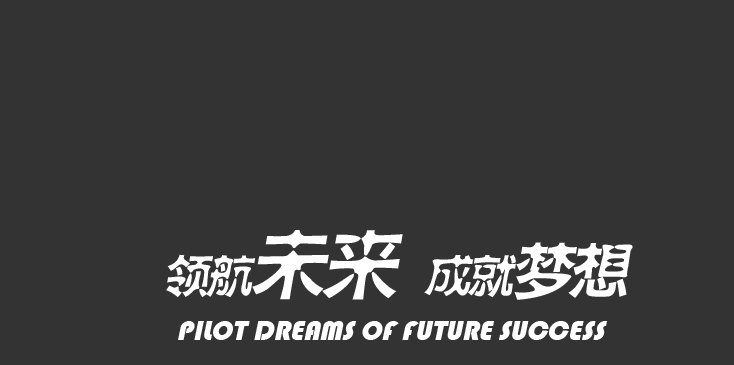
<style>
.page{position:relative;width:734px;height:365px;background:#333333}
.page>*{position:absolute;margin:0}
.t1{font:45.8px "FZSHHJW--GB1-0";letter-spacing:-0.06em;color:#ffffff;font-style:italic}
.t2{font:76.3px "FZSHHJW--GB1-0";letter-spacing:-0.06em;color:#ffffff;font-style:italic}
.t3{font:61px "FZSHHJW--GB1-0";letter-spacing:-0.06em;color:#ffffff;font-style:italic}
.t4{font:30px "Bauhaus93";color:#ffffff;scale:0.92 1}
</style>
<div class="page">
<p class="t1" style="left:166px;top:230px;width:467px;height:70px">领航<span class="t2">未来</span>   成就<span class="t3">梦想</span></p>
<p class="t4" style="left:178px;top:321px;width:430px;height:19px">PILOT DREAMS OF FUTURE SUCCESS</p>
</div>
